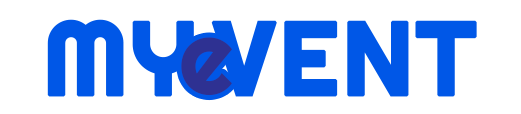
<style>
.page{position:relative;width:521px;height:114px;background:#ffffff}
.page>*{position:absolute;margin:0}
.t1{font:104.2px "Righteous-Regular";color:#0057e7;font-weight:bold}
.t2{font:104.2px "Righteous-Regular";letter-spacing:0.12em;color:#2e3192}
</style>
<div class="page">
<p class="t1" style="left:47px;top:19px;width:147px;height:78px">MY</p>
<p class="t1" style="left:211px;top:20px;width:266px;height:77px">VENT</p>
<p class="t2" style="left:181px;top:37px;width:51px;height:59px">e</p>
</div>
